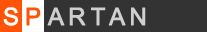
<style>
.page{position:relative;width:207px;height:32px;background:#333333}
.page>*{position:absolute;margin:0}
.t1{font:24px "ArialMT";letter-spacing:-0.05em;color:#ffffff;font-weight:bold}
.t2{font:24px "ArialMT";letter-spacing:-0.05em;color:#ff5408;font-weight:bold}
.t3{font:24px "ArialMT";letter-spacing:-0.05em;color:#cfcfcf;font-weight:bold}
</style>
<div class="page">
<p class="t1" style="left:3px;top:7px;width:16px;height:19px">S</p>
<p class="t2" style="left:26px;top:7px;width:15px;height:19px">P</p>
<p class="t3" style="left:47px;top:7px;width:99px;height:19px">A R T A N</p>
</div>
